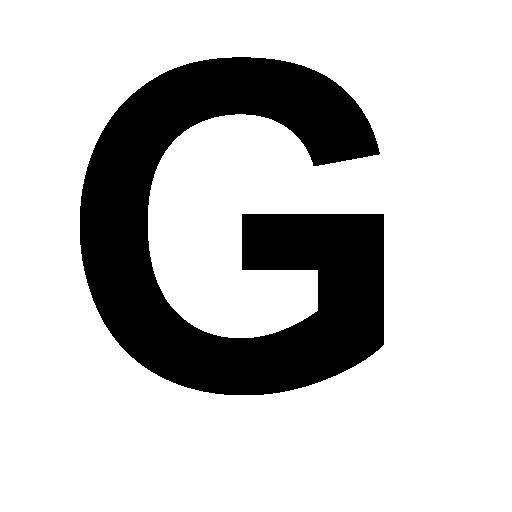
<style>
.page{position:relative;width:512px;height:512px;background:#ffffff}
.page>*{position:absolute;margin:0}
.t1{font:452.6px "Arial-BoldMT";letter-spacing:0.1em;color:#000000}
</style>
<div class="page">
<p class="t1" style="left:80px;top:57px;width:304px;height:338px">G</p>
</div>
